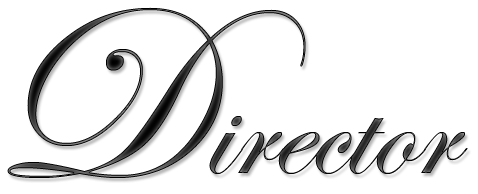
<style>
.page{position:relative;width:478px;height:194px;background:#ffffff}
.page>*{position:absolute;margin:0}
.t1{font:150px "EdwardianScriptITC"}
.t2{font:250px "EdwardianScriptITC"}
</style>
<div class="page">
<p class="t1" style="left:7px;top:7px;width:461px;height:171px"><span class="t2">D</span>irector</p>
</div>
